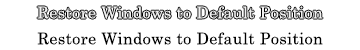
<style>
.page{position:relative;width:360px;height:50px;background:#ffffff}
.page>*{position:absolute;margin:0}
.t1{font:16px "CenturySchoolbook";letter-spacing:0.025em;color:#000000}
</style>
<div class="page">
<p class="t1" style="left:37px;top:32px;width:286px;height:13px">Restore Windows to Default Position</p>
</div>
